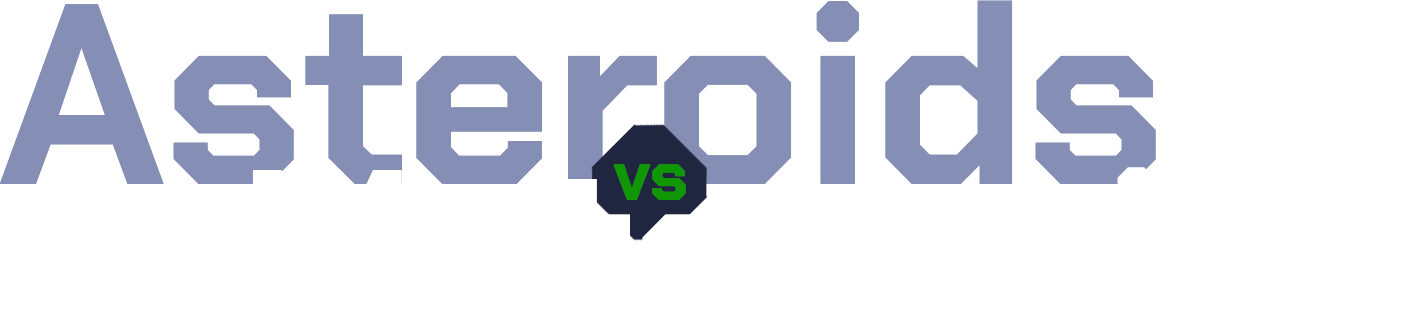
<style>
.page{position:relative;width:1410px;height:325px;background:#ffffff}
.page>*{position:absolute;margin:0}
.t1{font:256px "ChakraPetch-Bold";color:#858eb4}
.t2{font:70.4px "ChakraPetch-Bold";color:#119704}
</style>
<div class="page">
<p class="t1" style="left:0px;top:0px;width:1156px;height:184px">Asteroids</p>
<p class="t2" style="left:613px;top:164px;width:73px;height:36px">vs</p>
</div>
